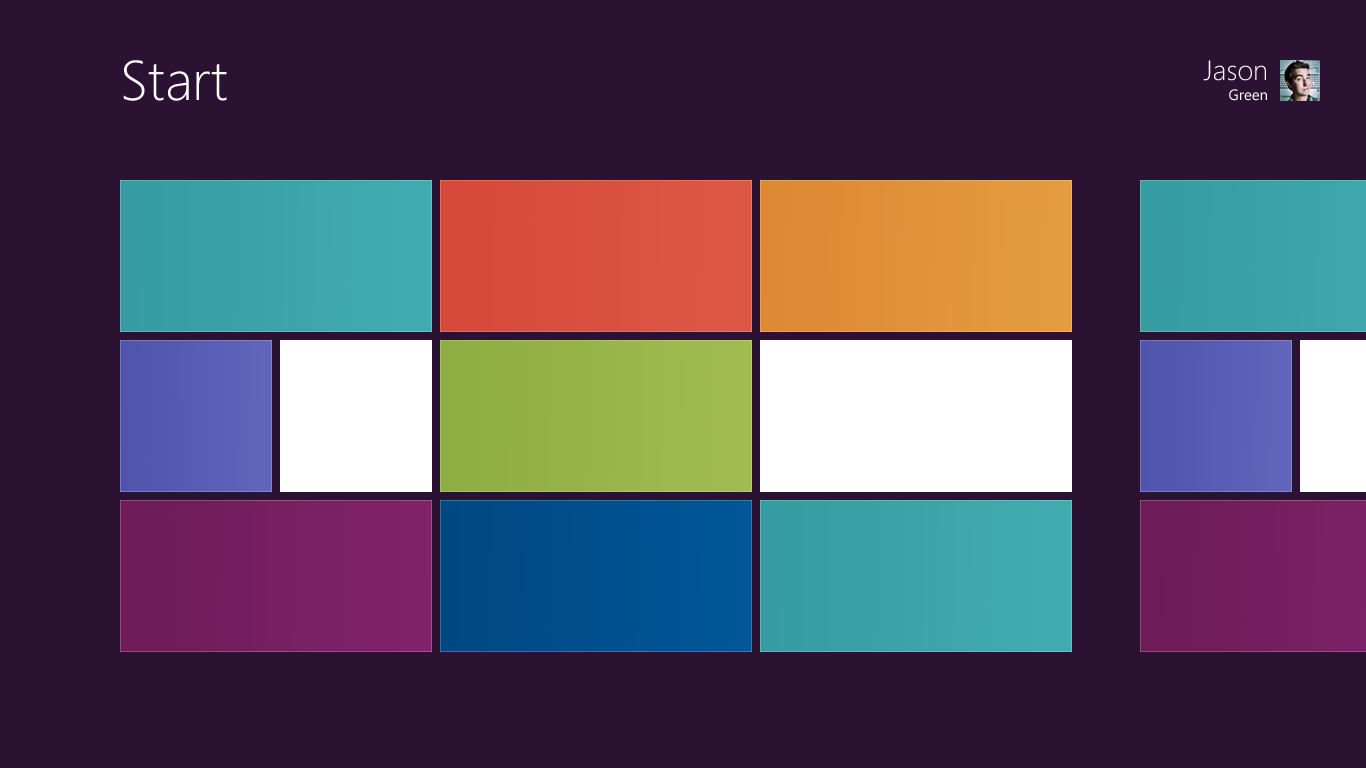
<style>
.page{position:relative;width:1366px;height:768px;background:#2b1232}
.page>*{position:absolute;margin:0}
.t1{font:56px "Segoe-Light";color:#ffffff}
.t2{font:28px "Segoe-Light";color:#ffffff}
.t3{font:15px/20px "Segoe";color:#ffffff}
</style>
<div class="page">
<p class="t1" style="left:123px;top:60px;width:104px;height:41px">Start</p>
<p class="t2" style="left:1203px;top:60px;width:64px;height:41px;text-align:right">Jason<br><span class="t3">Green</span></p>
</div>
